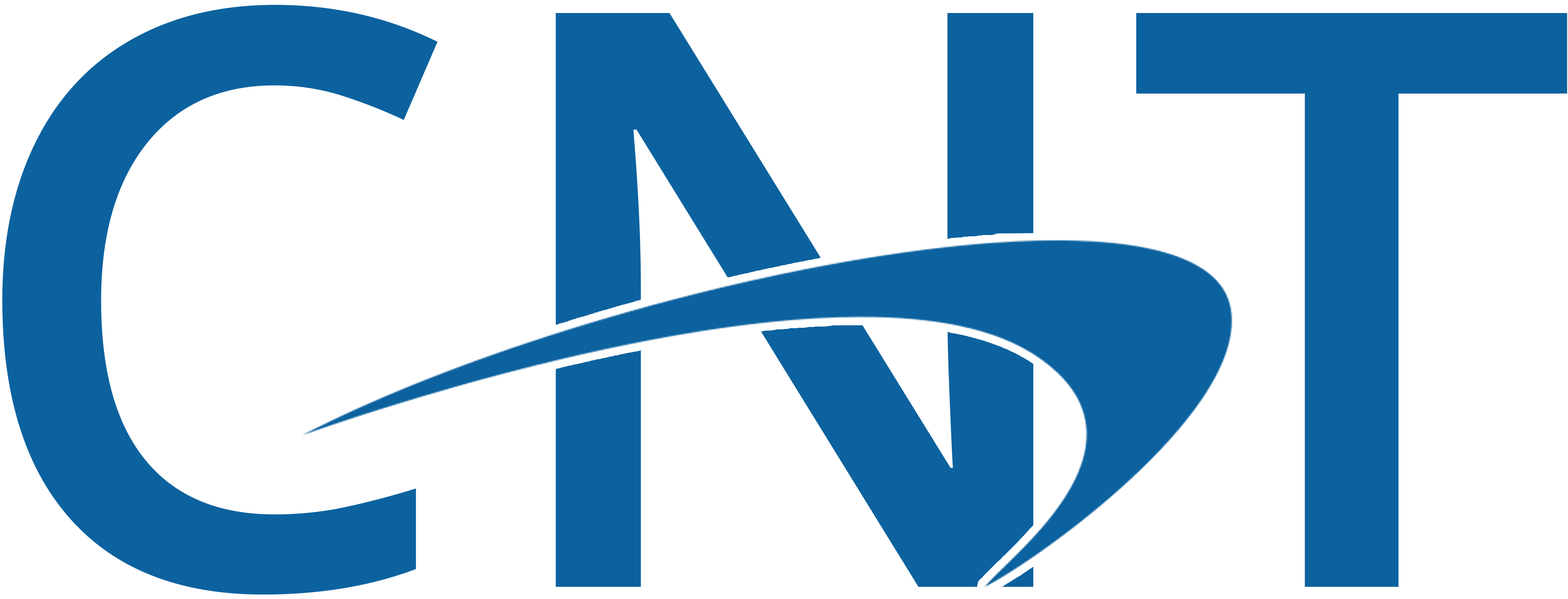
<style>
.page{position:relative;width:1568px;height:599px;background:#ffffff}
.page>*{position:absolute;margin:0}
.t1{font:803.3px "OpenSans-SemiBold";letter-spacing:0.02em;color:#0c629f;text-transform:uppercase}
</style>
<div class="page">
<p class="t1" style="left:2px;top:5px;width:1565px;height:589px">CNT</p>
</div>
